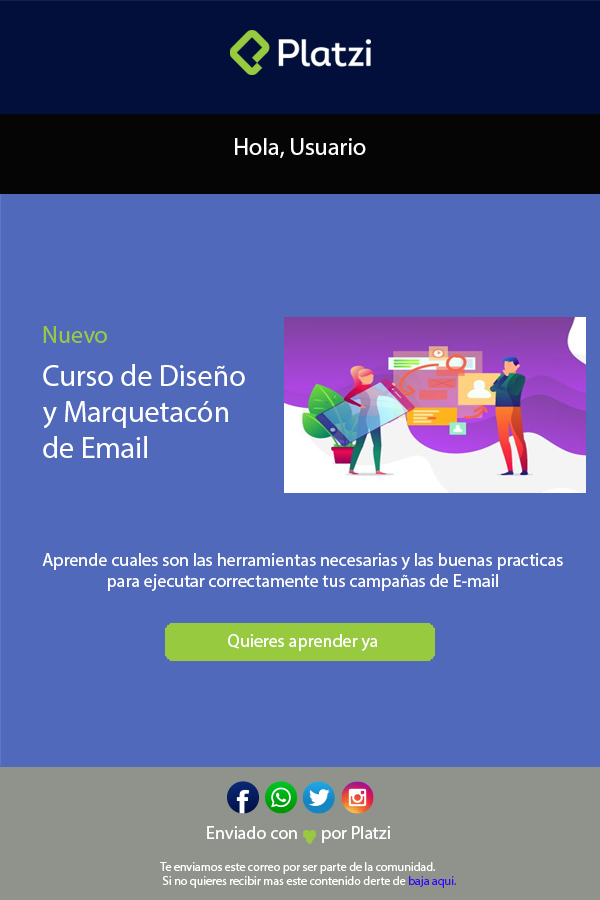
<style>
.page{position:relative;width:600px;height:900px;background:#5069ba}
.page>*{position:absolute;margin:0}
.t1{font:24px "MyriadPro-Regular";color:#ffffff}
.t2{font:24px "MyriadPro-Regular";color:#98ca3f}
.t3{font:30px "MyriadPro-Regular";color:#ffffff}
.t4{font:18px "MyriadPro-Regular";color:#ffffff}
.t5{font:12px "MyriadPro-Regular";color:#ffffff}
.t6{font:12px "MyriadPro-Regular";color:#310ceb}
</style>
<div class="page">
<p class="t1" style="left:235px;top:138px;width:131px;height:20px">Hola, Usuario</p>
<p class="t2" style="left:43px;top:326px;width:64px;height:17px">Nuevo</p>
<p class="t3" style="left:43px;top:364px;width:202px;height:94px">Curso de Diseño <br>y Marquetacón<br>de Email</p>
<p class="t4" style="left:42px;top:553px;width:521px;height:38px;text-align:center">Aprende cuales son las herramientas necesarias y las buenas practicas para ejecutar correctamente tus campañas de E-mail</p>
<p class="t4" style="left:228px;top:634px;width:150px;height:17px">Quieres aprender ya</p>
<p class="t4" style="left:207px;top:826px;width:183px;height:17px">Enviado con      por Platzi</p>
<p class="t5" style="left:160px;top:862px;width:296px;height:26px">Te enviamos este correo por ser parte de la comunidad.<br> Si no quieres recibir mas este contenido derte de <span class="t6">baja aqui.</span></p>
</div>
